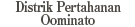
<style>
.page{position:relative;width:135px;height:27px;background:#ffffff}
.page>*{position:absolute;margin:0}
.t1{font:14px/13px "RyuminPro-ExBold";letter-spacing:-0.04em;color:#4c4843;scale:0.9 1}
</style>
<div class="page">
<p class="t1" style="left:15px;top:1px;width:106px;height:24px;text-align:center">Distrik Pertahanan<br>Oominato</p>
</div>
